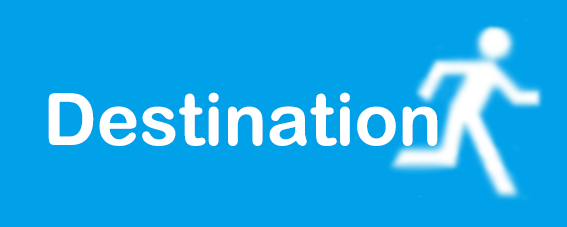
<style>
.page{position:relative;width:567px;height:227px;background:#00a1e9}
.page>*{position:absolute;margin:0}
.t1{font:72px "ArialRoundedMTBold";color:#ffffff}
</style>
<div class="page">
<p class="t1" style="left:48px;top:92px;width:390px;height:54px">Destination</p>
</div>
